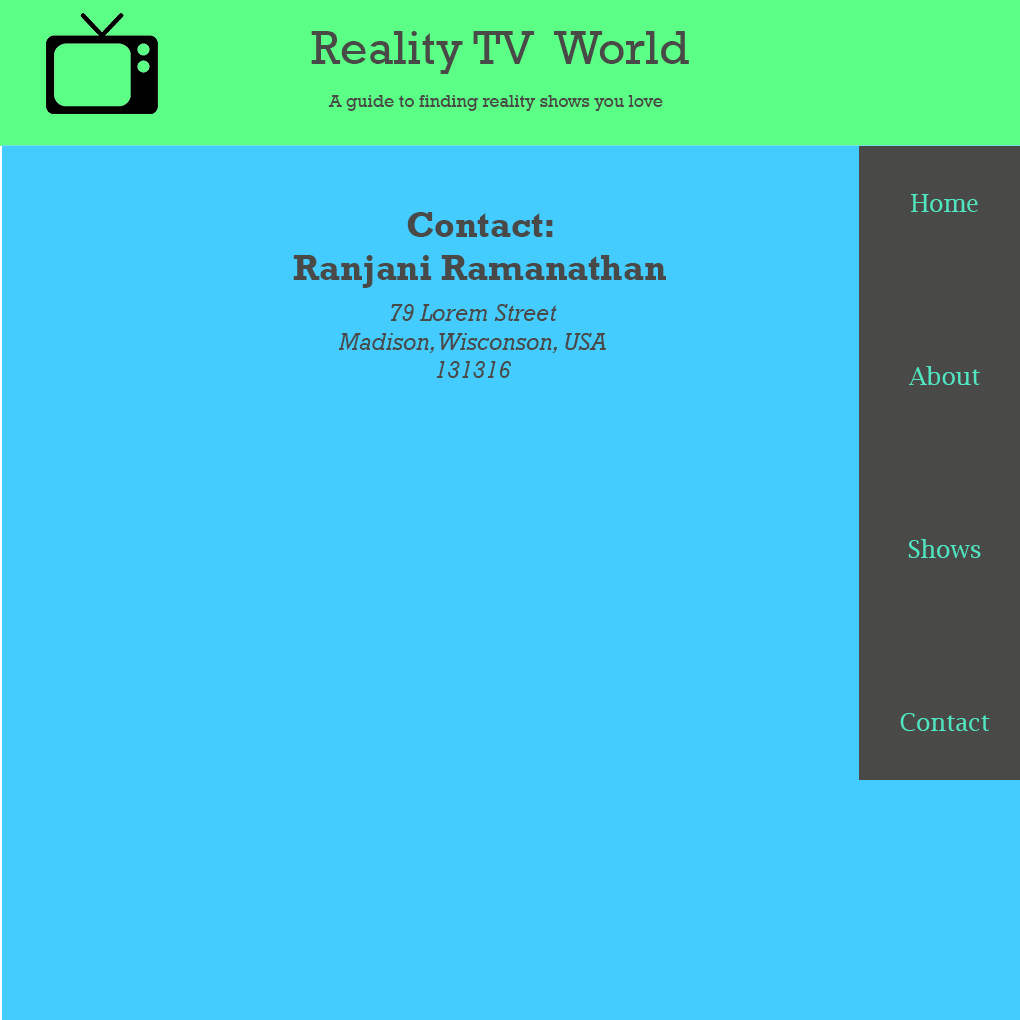
<style>
.page{position:relative;width:1020px;height:1020px;background:#44ccff}
.page>*{position:absolute;margin:0}
.t1{font:18px "Rockwell";color:#494947}
.t2{font:48px "Rockwell";color:#494947}
.t3{font:24px "LucidaBright";color:#50e6c2}
.t4{font:36px "Rockwell-Bold";color:#494947}
.t5{font:24px "Rockwell-Italic";color:#494947}
</style>
<div class="page">
<p class="t1" style="left:311px;top:31px;width:378px;height:80px"><span class="t2">Reality TV  World<br></span><br>    A guide to finding reality shows you love</p>
<p class="t3" style="left:900px;top:194px;width:90px;height:537px;text-align:center">Home<br><br><br><br><br><br>About<br><br><br><br><br><br>Shows<br><br><br><br><br><br>Contact</p>
<p class="t4" style="left:293px;top:212px;width:373px;height:76px;text-align:center">Contact:<br>Ranjani Ramanathan</p>
<p class="t5" style="left:338px;top:304px;width:268px;height:74px;text-align:center">79 Lorem Street<br>Madison, Wisconson, USA<br>131316</p>
</div>
